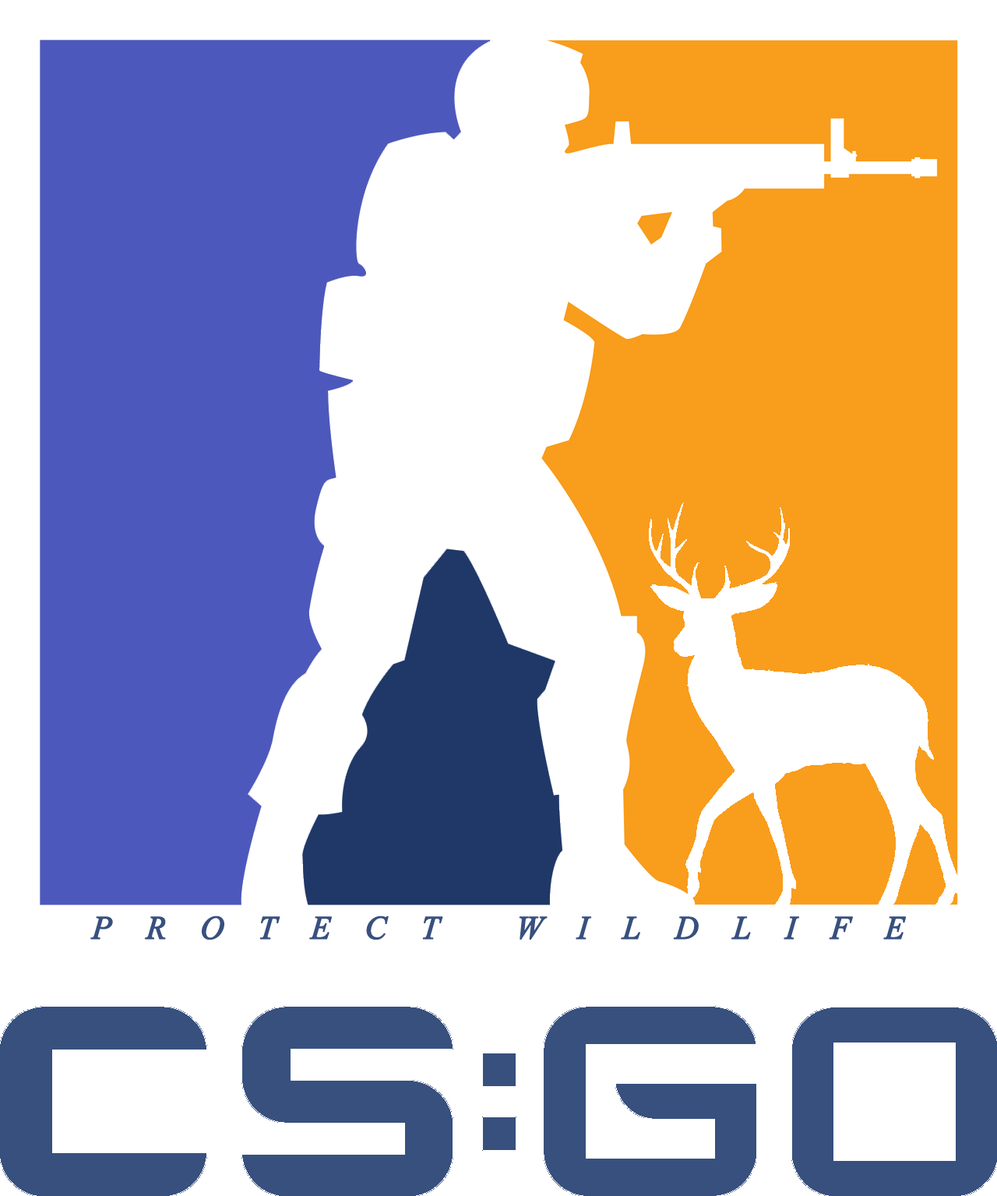
<style>
.page{position:relative;width:997px;height:1196px;background:#ffffff}
.page>*{position:absolute;margin:0}
.t1{font:32.7px "TimesNewRomanPS-ItalicMT";letter-spacing:1.02em;color:#38507e;font-weight:bold}
</style>
<div class="page">
<p class="t1" style="left:90px;top:915px;width:816px;height:25px">PROTECT WILDLIFE</p>
</div>
